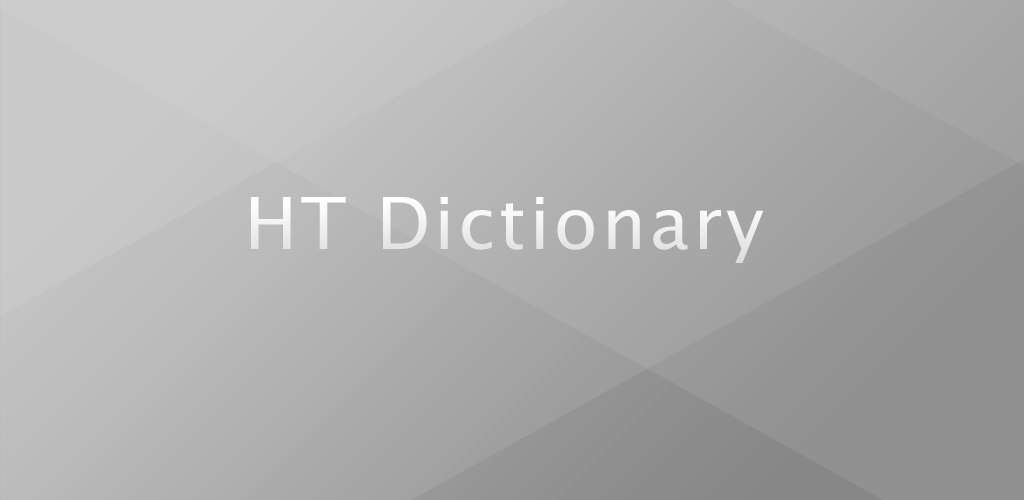
<style>
.page{position:relative;width:1024px;height:500px}
.page>*{position:absolute;margin:0}
.t1{font:72px "LucidaGrande";letter-spacing:0.05em;color:#ffffff}
</style>
<div class="page">
<p class="t1" style="left:251px;top:197px;width:513px;height:66px">HT Dictionary</p>
</div>
